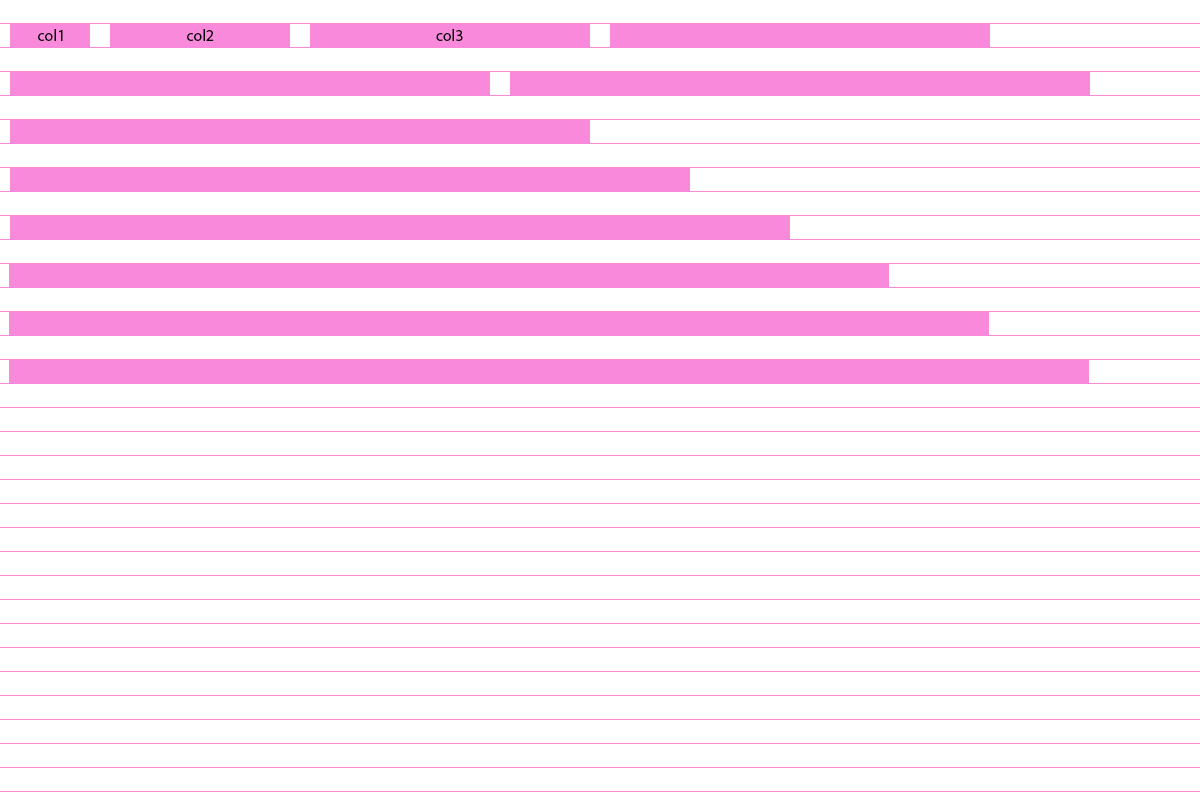
<style>
.page{position:relative;width:1200px;height:800px;background:#ffffff}
.page>*{position:absolute;margin:0}
.t1{font:16px "MyriadPro-Regular";color:#010101}
.t2{font:16px "MyriadPro-Regular";color:#000000}
</style>
<div class="page">
<p class="t1" style="left:38px;top:29px;width:25px;height:12px">col1</p>
<p class="t2" style="left:187px;top:29px;width:27px;height:12px">col2</p>
<p class="t2" style="left:436px;top:29px;width:27px;height:12px">col3</p>
</div>
